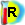
<style>
.page{position:relative;width:25px;height:25px}
.page>*{position:absolute;margin:0}
.t1{font:14px "Arial-BoldMT";color:#000000}
</style>
<div class="page">
<p class="t1" style="left:8px;top:7px;width:9px;height:10px">R</p>
</div>
